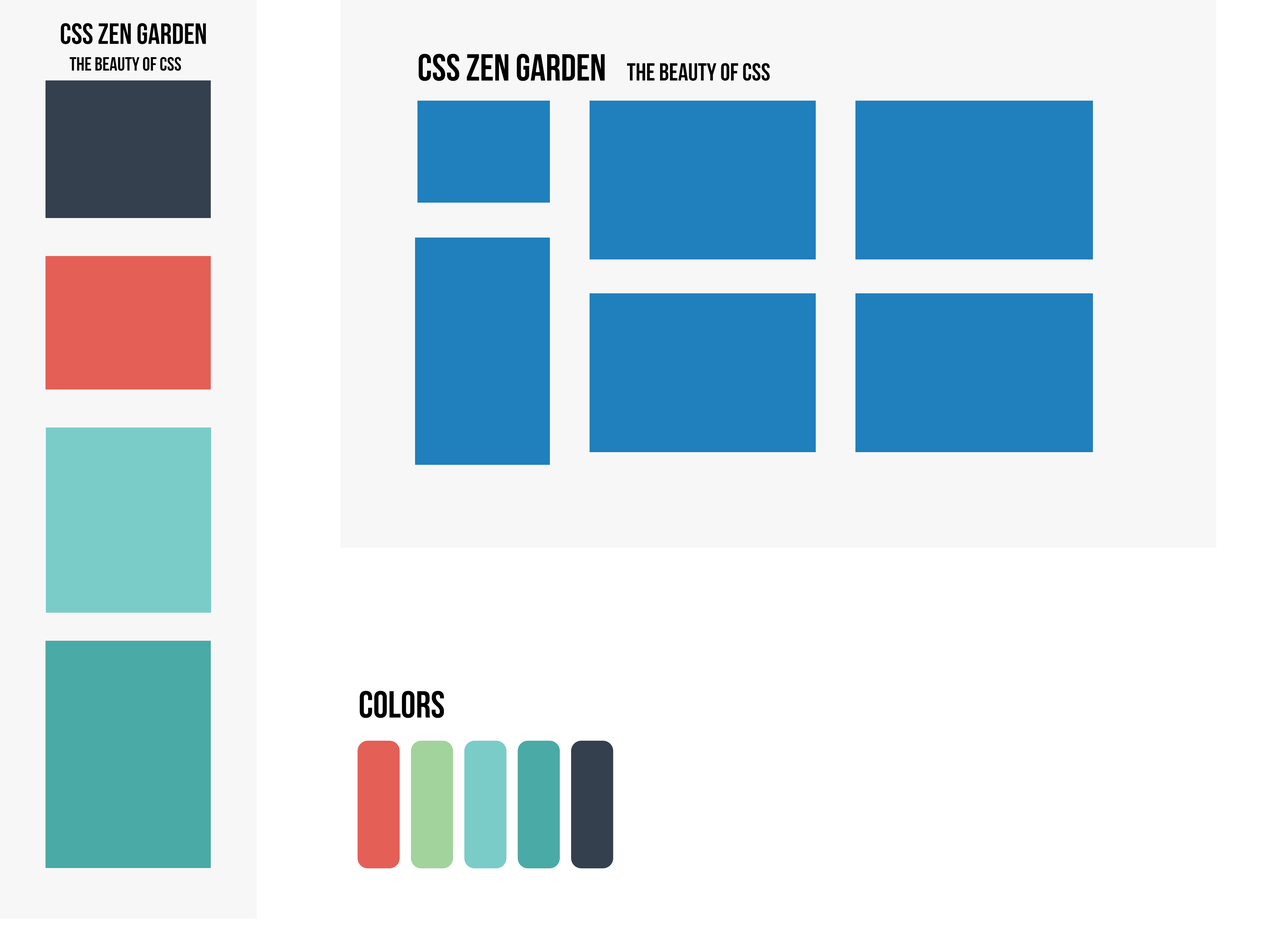
<style>
.page{position:relative;width:1264px;height:944px;background:#ffffff}
.page>*{position:absolute;margin:0}
.t1{font:19.2px/26.7px "BebasNeueBold";color:#000000}
.t2{font:29.4px/26.7px "BebasNeueBold";color:#000000}
.t3{font:24.6px "BebasNeueBold";color:#000000}
.t4{font:37.6px "BebasNeueBold";color:#000000}
</style>
<div class="page">
<p class="t1" style="left:61px;top:23px;width:145px;height:48px"><span class="t2">CSS Zen Garden <br> </span>the beauty of Css</p>
<p class="t3" style="left:418px;top:54px;width:352px;height:27px"><span class="t4">CSS Zen Garden  </span>the beauty of Css</p>
<p class="t4" style="left:360px;top:690px;width:84px;height:28px">COLORS</p>
</div>
